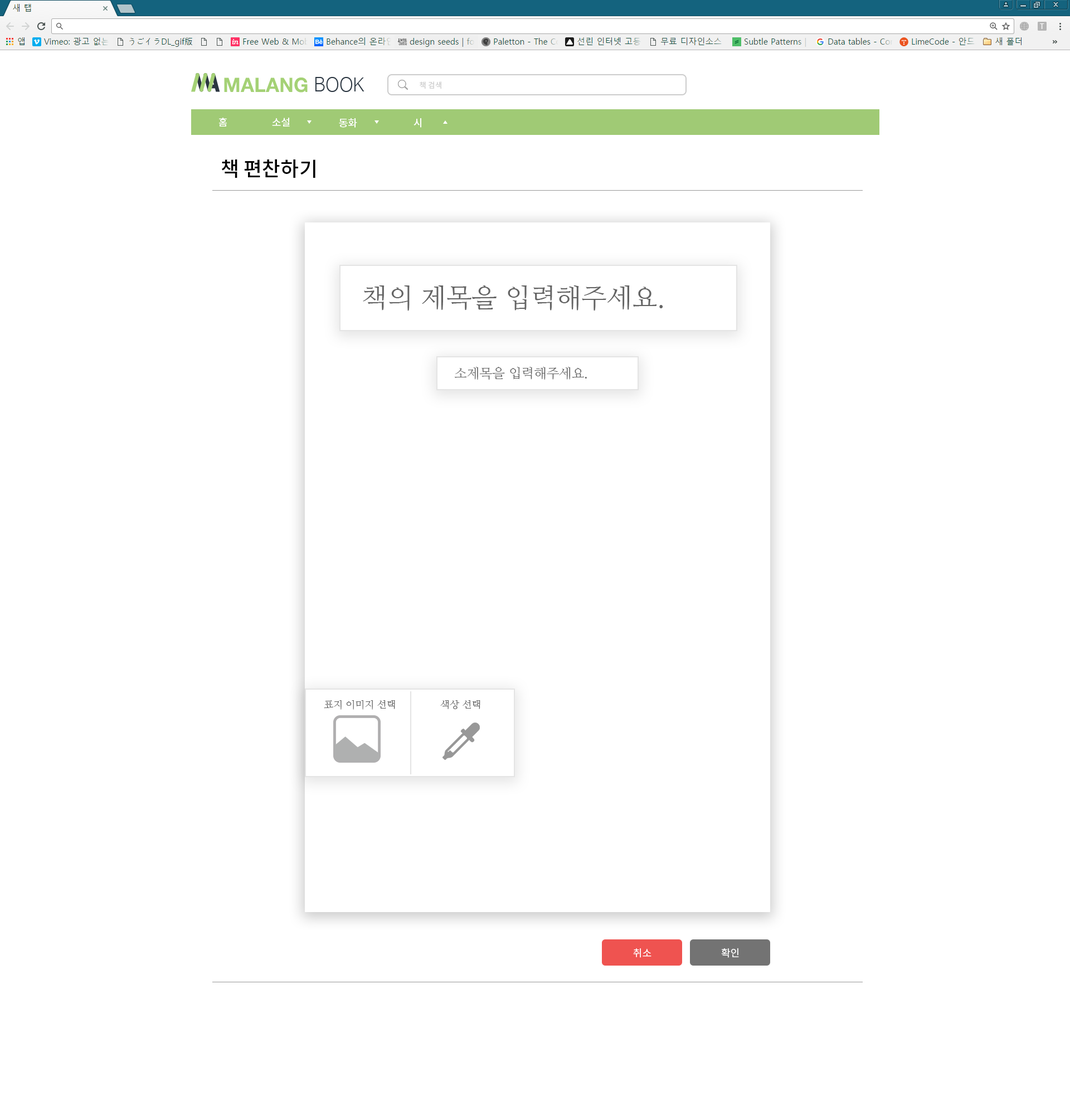
<style>
.page{position:relative;width:1070px;height:1115px;background:#ffffff}
.page>*{position:absolute;margin:0}
.t1{font:7.8px "NotoSansCJKkr-Medium";color:#d2d2d2}
.t2{font:10px "NotoSansCJKkr-Medium";color:#ffffff}
.t3{font:7.8px "NanumBarunGothicBold";color:#f3f3f3}
.t4{font:20.1px "NotoSansCJKkr-Medium";color:#000000}
.t5{font:26.7px "NanumMyeongjo";color:#646464}
.t6{font:13.4px "NanumMyeongjo";color:#646464}
.t7{font:10px "NanumMyeongjo";color:#646464}
.t8{font:10px "NotoSansCJKkr-Regular";color:#ffffff}
</style>
<div class="page">
<p class="t1" style="left:420px;top:81px;width:21px;height:8px">책 검색</p>
<p class="t2" style="left:219px;top:118px;width:8px;height:8px">홈</p>
<p class="t2" style="left:272px;top:118px;width:18px;height:8px">소설</p>
<p class="t2" style="left:339px;top:118px;width:18px;height:10px">동화</p>
<p class="t2" style="left:413px;top:118px;width:8px;height:10px"><span class="t3"> </span>시</p>
<p class="t4" style="left:221px;top:159px;width:94px;height:19px">책 편찬하기</p>
<p class="t5" style="left:363px;top:285px;width:300px;height:26px">책의 제목을 입력해주세요.</p>
<p class="t6" style="left:455px;top:367px;width:132px;height:12px">소제목을 입력해주세요.</p>
<p class="t7" style="left:324px;top:700px;width:71px;height:9px">표지 이미지 선택</p>
<p class="t7" style="left:440px;top:700px;width:40px;height:9px">색상 선택</p>
<p class="t8" style="left:633px;top:948px;width:18px;height:9px">취소</p>
<p class="t8" style="left:721px;top:947px;width:18px;height:10px">확인</p>
</div>
